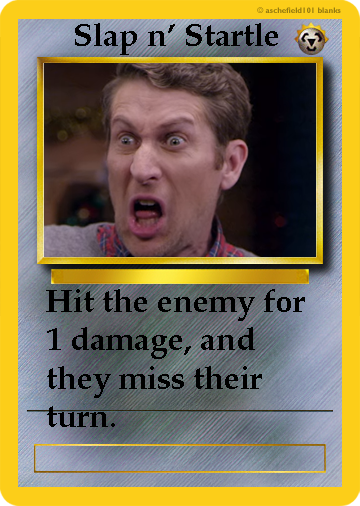
<style>
.page{position:relative;width:360px;height:506px}
.page>*{position:absolute;margin:0}
.t1{font:32px "PalatinoLinotype-Bold";color:#000000}
</style>
<div class="page">
<p class="t1" style="left:75px;top:23px;width:203px;height:32px">Slap n’ Startle</p>
<p class="t1" style="left:46px;top:289px;width:259px;height:138px">Hit the enemy for 1 damage, and they miss their turn.</p>
</div>
